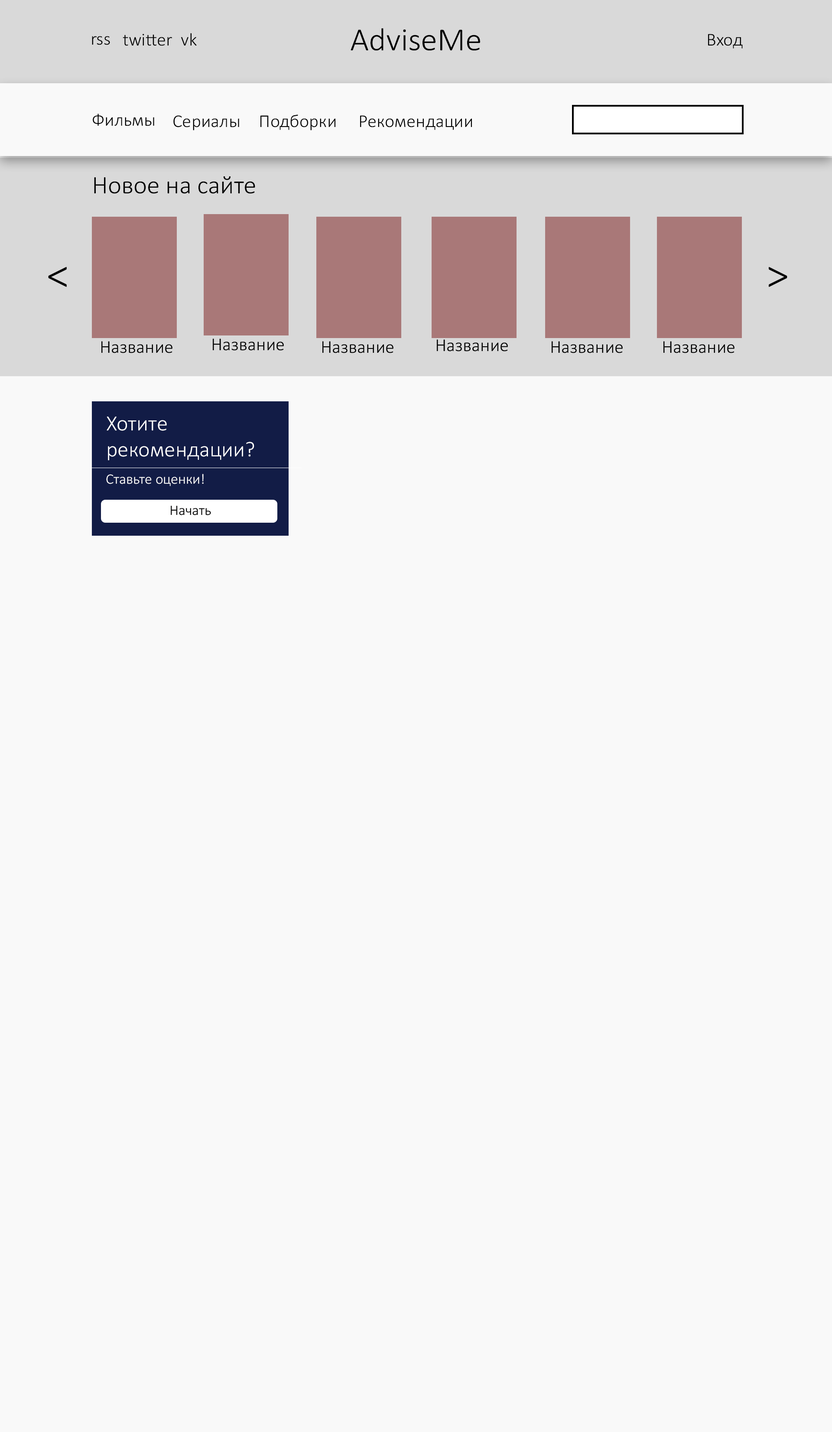
<style>
.page{position:relative;width:832px;height:1432px;background:#f9f9f9}
.page>*{position:absolute;margin:0}
.t1{font:32.5px "Calibri-Light";color:#000000}
.t2{font:18.1px "Calibri-Light";color:#000000}
.t3{font:25.3px "Calibri-Light";color:#000000}
.t4{font:43.4px "Calibri-Light";color:#000000}
.t5{font:21.7px "Calibri-Light";color:#ffffff}
.t6{font:14.5px "Calibri-Light";color:#ffffff}
</style>
<div class="page">
<p class="t1" style="left:351px;top:28px;width:129px;height:23px">AdviseMe</p>
<p class="t2" style="left:92px;top:36px;width:18px;height:9px">rss</p>
<p class="t2" style="left:123px;top:34px;width:49px;height:12px">twitter</p>
<p class="t2" style="left:181px;top:33px;width:16px;height:13px">vk</p>
<p class="t2" style="left:708px;top:34px;width:35px;height:15px">Вход</p>
<p class="t2" style="left:93px;top:114px;width:61px;height:12px">Фильмы</p>
<p class="t2" style="left:173px;top:115px;width:66px;height:16px">Сериалы</p>
<p class="t2" style="left:261px;top:114px;width:75px;height:17px">Подборки</p>
<p class="t2" style="left:360px;top:115px;width:112px;height:15px">Рекомендации</p>
<p class="t3" style="left:94px;top:176px;width:161px;height:18px">Новое на сайте</p>
<p class="t4" style="left:48px;top:267px;width:19px;height:20px">&lt;</p>
<p class="t4" style="left:769px;top:267px;width:19px;height:20px">&gt;</p>
<p class="t5" style="left:107px;top:417px;width:147px;height:43px">Хотите рекомендации?</p>
<p class="t6" style="left:106px;top:474px;width:98px;height:12px">Ставьте оценки!</p>
</div>
